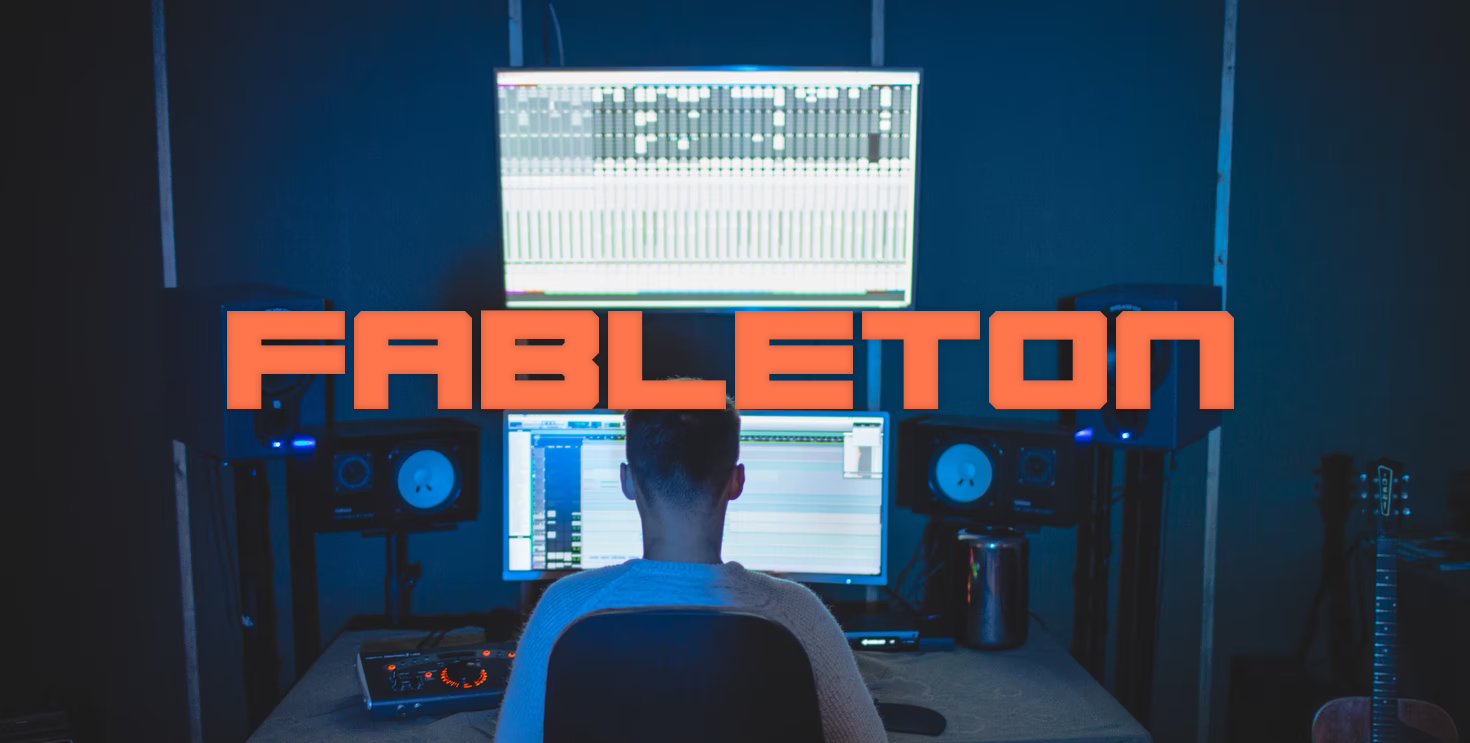
<style>
.page{position:relative;width:1470px;height:743px}
.page>*{position:absolute;margin:0}
.t1{font:131.1px "Base45-Regular";color:#ff764d}
</style>
<div class="page">
<p class="t1" style="left:227px;top:310px;width:1007px;height:100px">FABLETON</p>
</div>
